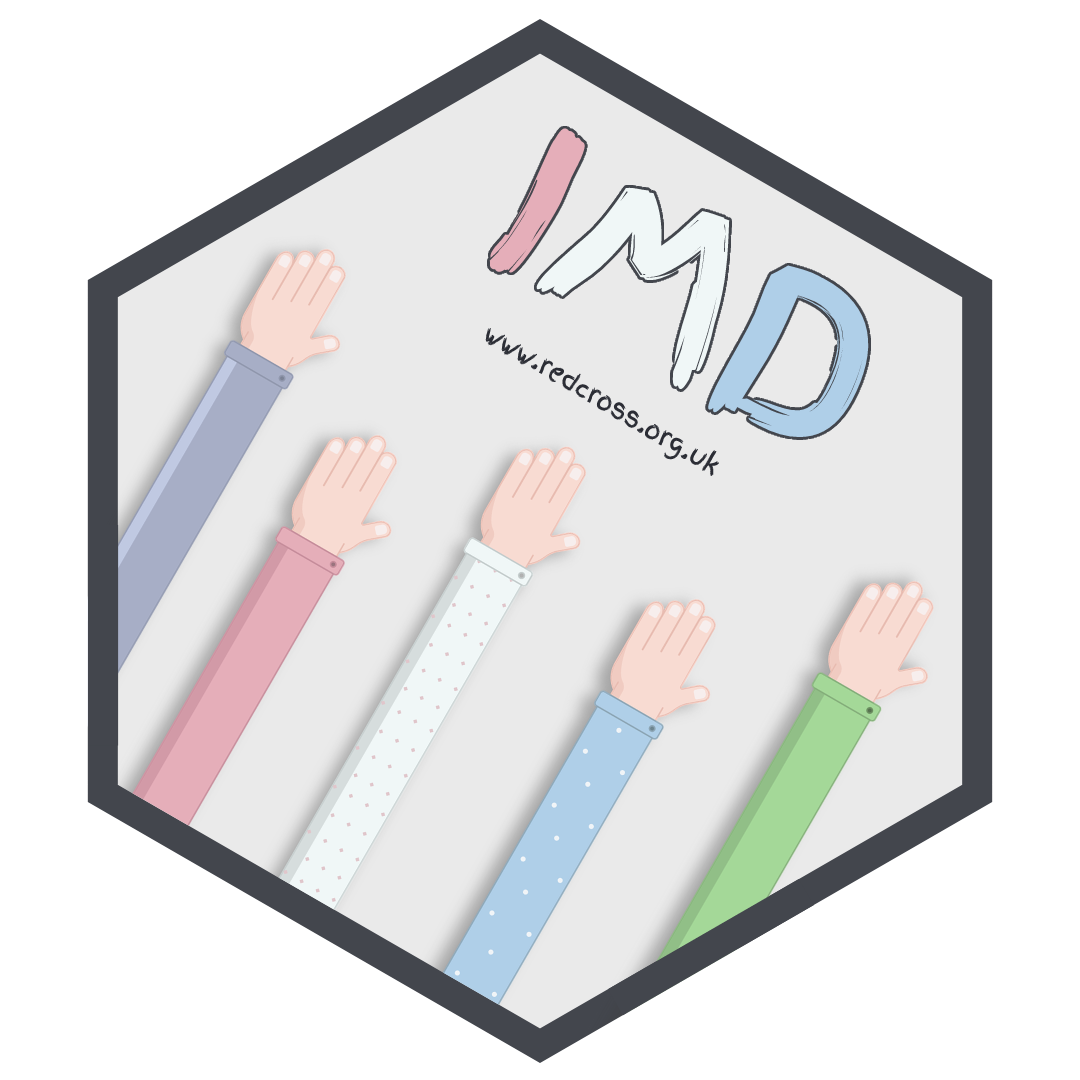
<style>
.page{position:relative;width:1080px;height:1080px;background:#ffffff}
.page>*{position:absolute;margin:0}
.t1{font:25px "FingerPaint-Regular";color:#2b2d35}
</style>
<div class="page">
<p class="t1" style="left:485px;top:328px;width:234px;height:148px;rotate:31deg">www.redcross.org.uk</p>
</div>
